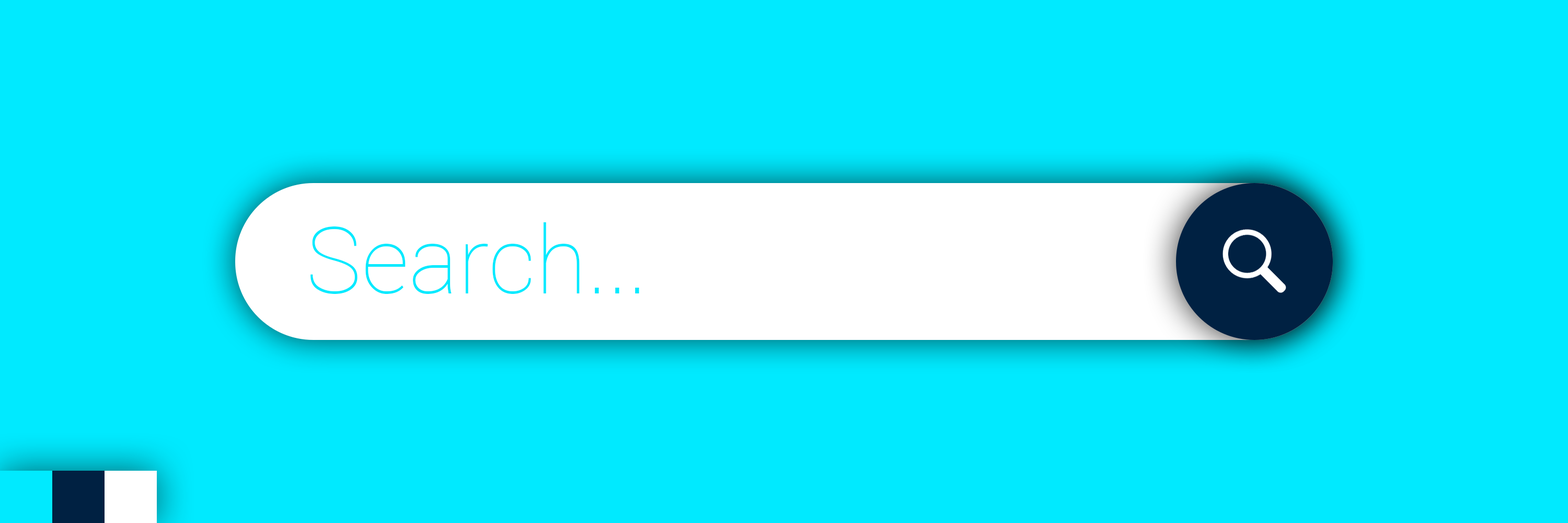
<style>
.page{position:relative;width:1568px;height:523px;background:#00eaff}
.page>*{position:absolute;margin:0}
.t1{font:93.6px "Roboto-Thin";color:#00eaff}
</style>
<div class="page">
<p class="t1" style="left:310px;top:222px;width:329px;height:72px">Search...</p>
</div>
